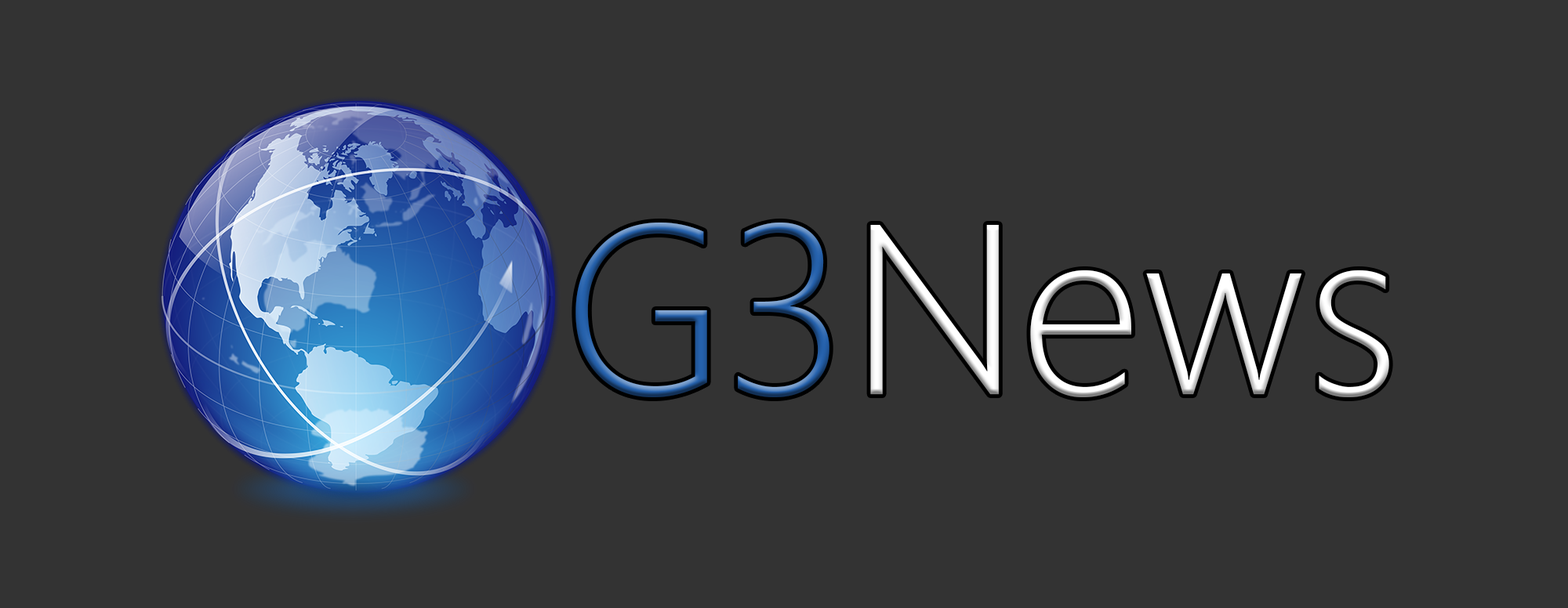
<style>
.page{position:relative;width:1568px;height:608px;background:#333333}
.page>*{position:absolute;margin:0}
.t1{font:241.7px "SegoeUI-Light"}
</style>
<div class="page">
<p class="t1" style="left:575px;top:223px;width:814px;height:174px">G3News</p>
</div>
